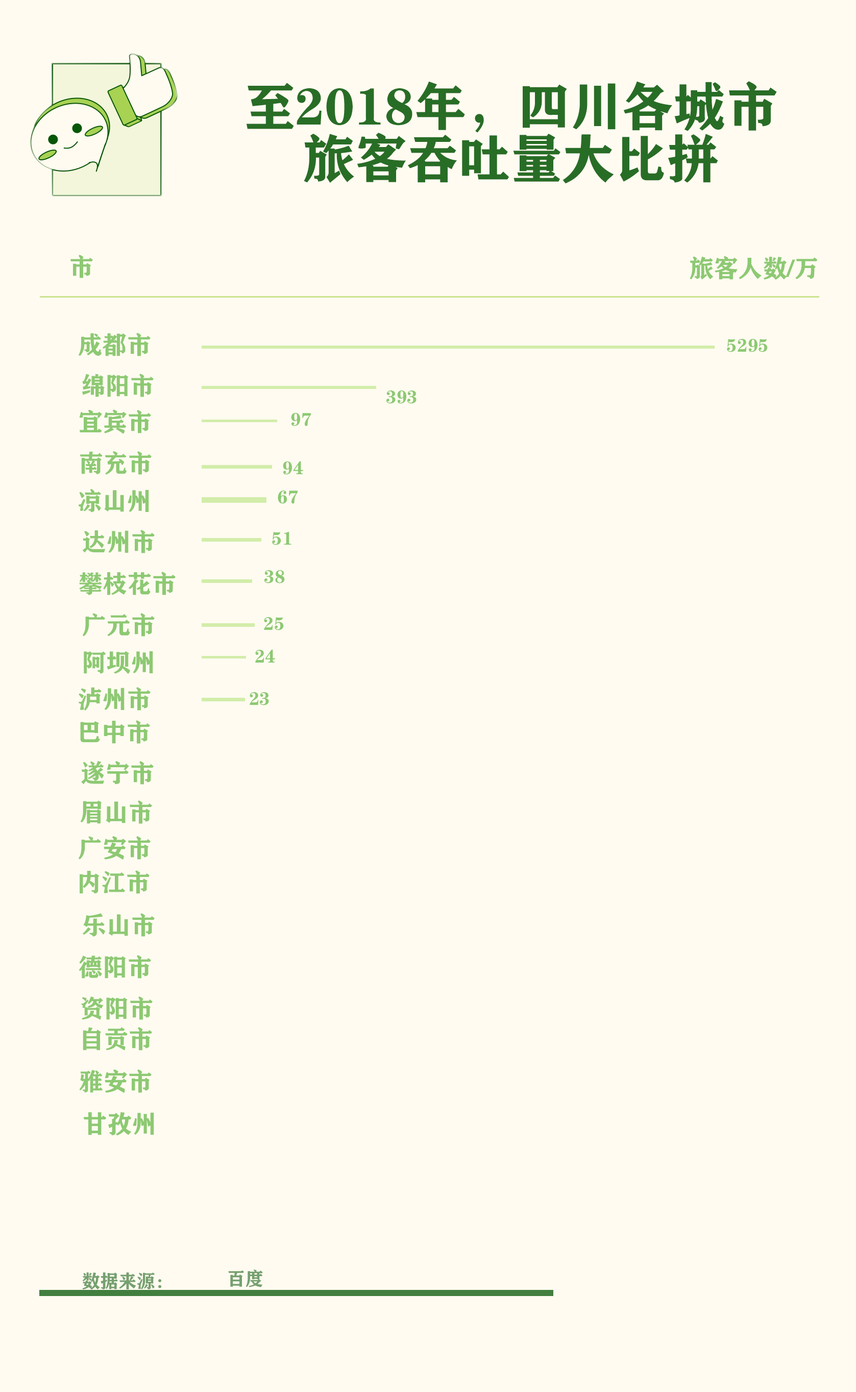
<style>
.page{position:relative;width:856px;height:1392px;background:#fffbf0}
.page>*{position:absolute;margin:0}
.t1{font:52px/52px "FZCHSJW--GB1-0";color:#286d26;text-transform:uppercase}
.t2{font:24.5px "FZCHSJW--GB1-0";color:#8dc973;text-transform:uppercase}
.t3{font:18.4px "FZCHSJW--GB1-0";color:#8dc973;text-transform:uppercase}
.t4{font:18.4px "FZCHSJW--GB1-0";color:#75a06f;text-transform:uppercase}
</style>
<div class="page">
<p class="t1" style="left:247px;top:81px;width:530px;height:103px;text-align:center">至2018年，四川各城市<br>旅客吞吐量大比拼</p>
<p class="t2" style="left:70px;top:255px;width:23px;height:23px">市</p>
<p class="t2" style="left:690px;top:256px;width:128px;height:24px">旅客人数/万</p>
<p class="t2" style="left:78px;top:333px;width:73px;height:23px">成都市</p>
<p class="t3" style="left:727px;top:339px;width:41px;height:13px">5295</p>
<p class="t2" style="left:82px;top:374px;width:72px;height:23px">绵阳市</p>
<p class="t3" style="left:386px;top:390px;width:31px;height:14px">393</p>
<p class="t2" style="left:79px;top:410px;width:72px;height:24px">宜宾市</p>
<p class="t3" style="left:291px;top:413px;width:20px;height:13px">97</p>
<p class="t2" style="left:80px;top:451px;width:72px;height:24px">南充市</p>
<p class="t3" style="left:283px;top:461px;width:20px;height:14px">94</p>
<p class="t2" style="left:79px;top:489px;width:70px;height:24px">凉山州</p>
<p class="t3" style="left:278px;top:490px;width:20px;height:14px">67</p>
<p class="t2" style="left:82px;top:530px;width:73px;height:24px">达州市</p>
<p class="t3" style="left:272px;top:532px;width:20px;height:13px">51</p>
<p class="t3" style="left:264px;top:570px;width:21px;height:14px">38</p>
<p class="t2" style="left:79px;top:572px;width:97px;height:23px">攀枝花市</p>
<p class="t2" style="left:82px;top:613px;width:73px;height:24px">广元市</p>
<p class="t3" style="left:264px;top:617px;width:20px;height:14px">25</p>
<p class="t2" style="left:84px;top:651px;width:69px;height:23px">阿坝州</p>
<p class="t3" style="left:255px;top:650px;width:20px;height:13px">24</p>
<p class="t2" style="left:79px;top:687px;width:72px;height:24px">泸州市</p>
<p class="t3" style="left:250px;top:692px;width:19px;height:14px">23</p>
<p class="t2" style="left:80px;top:721px;width:70px;height:23px">巴中市</p>
<p class="t2" style="left:81px;top:761px;width:73px;height:24px">遂宁市</p>
<p class="t2" style="left:80px;top:801px;width:72px;height:23px">眉山市</p>
<p class="t2" style="left:78px;top:836px;width:73px;height:24px">广安市</p>
<p class="t2" style="left:80px;top:871px;width:70px;height:23px">内江市</p>
<p class="t2" style="left:83px;top:914px;width:72px;height:23px">乐山市</p>
<p class="t2" style="left:79px;top:955px;width:72px;height:24px">德阳市</p>
<p class="t2" style="left:81px;top:997px;width:72px;height:23px">资阳市</p>
<p class="t2" style="left:83px;top:1027px;width:69px;height:24px">自贡市</p>
<p class="t2" style="left:79px;top:1070px;width:73px;height:23px">雅安市</p>
<p class="t2" style="left:83px;top:1112px;width:71px;height:24px">甘孜州</p>
<p class="t4" style="left:82px;top:1272px;width:79px;height:18px">数据来源：</p>
<p class="t4" style="left:228px;top:1270px;width:35px;height:18px">百度</p>
</div>
